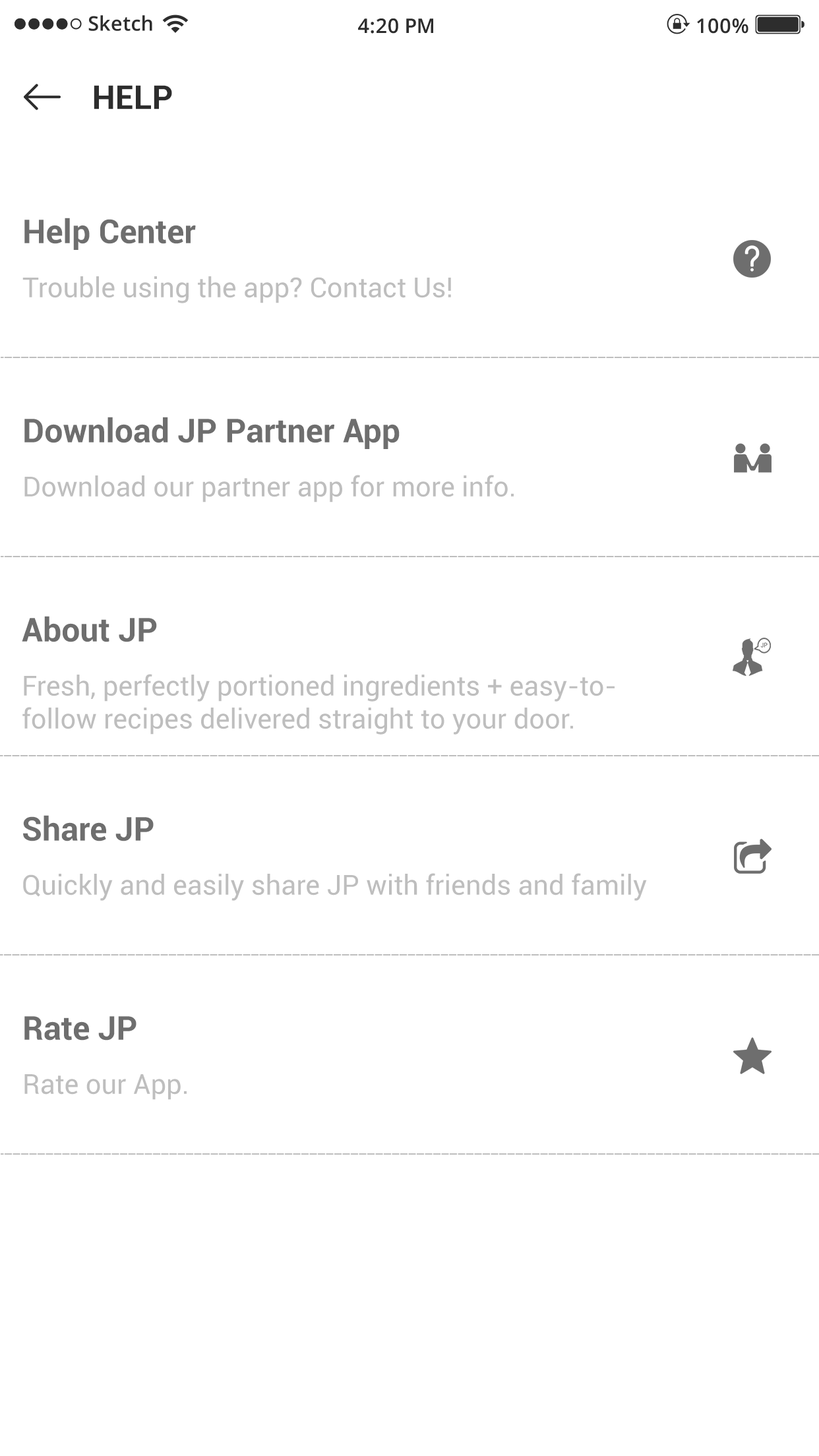
<style>
.page{position:relative;width:819px;height:1456px;background:#ffffff}
.page>*{position:absolute;margin:0}
.t1{font:20.1px "OpenSans-Semibold";color:#2d2d2d}
.t2{font:33px "Roboto-Bold";color:#2d2d2d}
.t3{font:33px "Roboto-Bold";color:#6e6e6e}
.t4{font:27.5px "Roboto-Regular";color:#bebebe}
</style>
<div class="page">
<p class="t1" style="left:88px;top:15px;width:64px;height:16px">Sketch</p>
<p class="t1" style="left:358px;top:18px;width:75px;height:16px">4:20 PM</p>
<p class="t1" style="left:697px;top:18px;width:51px;height:16px">100%</p>
<p class="t2" style="left:94px;top:85px;width:78px;height:24px">HELP</p>
<p class="t3" style="left:24px;top:218px;width:172px;height:32px">Help Center</p>
<p class="t4" style="left:22px;top:276px;width:429px;height:27px">Trouble using the app? Contact Us!</p>
<p class="t3" style="left:24px;top:417px;width:376px;height:32px">Download JP Partner App</p>
<p class="t4" style="left:24px;top:475px;width:490px;height:27px">Download our partner app for more info.</p>
<p class="t3" style="left:22px;top:616px;width:135px;height:26px">About JP</p>
<p class="t4" style="left:22px;top:674px;width:593px;height:61px">Fresh, perfectly portioned ingredients + easy-to-<br>follow recipes delivered straight to your door.</p>
<p class="t3" style="left:23px;top:815px;width:131px;height:26px">Share JP</p>
<p class="t4" style="left:23px;top:873px;width:624px;height:28px">Quickly and easily share JP with friends and family</p>
<p class="t3" style="left:24px;top:1016px;width:112px;height:25px">Rate JP</p>
<p class="t4" style="left:24px;top:1074px;width:163px;height:26px">Rate our App.</p>
</div>
